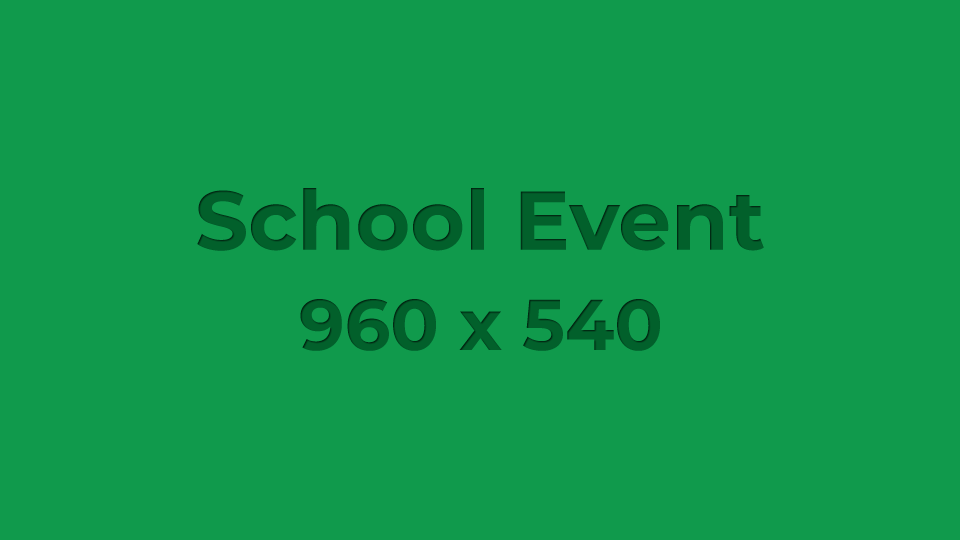
<style>
.page{position:relative;width:960px;height:540px;background:#109a4c}
.page>*{position:absolute;margin:0}
.t1{font:83.3px "Montserrat-Bold";color:#02602b}
.t2{font:71.7px "Montserrat-Bold";color:#02602b}
</style>
<div class="page">
<p class="t1" style="left:197px;top:188px;width:567px;height:63px">School Event</p>
<p class="t2" style="left:300px;top:299px;width:360px;height:52px">960 x 540</p>
</div>
